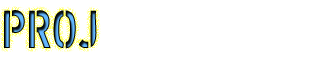
<style>
.page{position:relative;width:320px;height:60px;background:#ffffff}
.page>*{position:absolute;margin:0}
.t1{font:52.7px "XXIISTRAIGHT-ARMY"}
</style>
<div class="page">
<p class="t1" style="left:4px;top:10px;width:93px;height:39px">PROJ</p>
</div>
